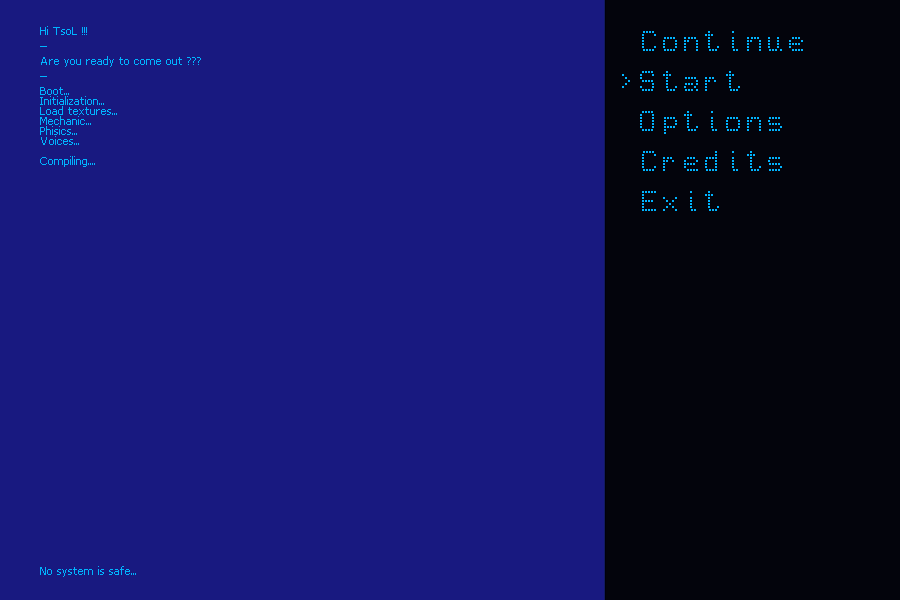
<style>
.page{position:relative;width:900px;height:600px;background:#181980}
.page>*{position:absolute;margin:0}
.t1{font:8.3px "DPix_8pt";color:#00b4ff}
.t2{font:33.3px "Epson1";color:#00b4ff}
</style>
<div class="page">
<p class="t1" style="left:40px;top:26px;width:161px;height:551px;text-align:right">Hi TsoL !!!<br>_<br><br>Are you ready to come out ???<br>_<br><br>Boot...<br>Initialization...<br>Load textures...<br>Mechanic...<br>Phisics...<br>Voices...<br><br>Compiling....<br><br><br><br><br><br><br><br><br><br><br><br><br><br><br><br><br><br><br><br><br><br><br><br><br><br><br><br><br><br><br><br><br><br><br><br><br><br><br><br><br>No system is safe...</p>
<p class="t2" style="left:640px;top:31px;width:163px;height:180px;text-align:right">Continue<br>Start<br>Options<br>Credits<br>Exit</p>
</div>
